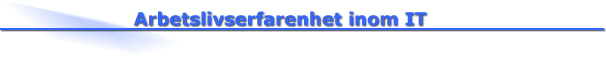
<style>
.page{position:relative;width:606px;height:57px;background:#ffffff}
.page>*{position:absolute;margin:0}
.t1{font:18px "Verdana-Bold";color:#3366ff}
</style>
<div class="page">
<p class="t1" style="left:133px;top:11px;width:294px;height:15px">Arbetslivserfarenhet inom IT</p>
</div>
